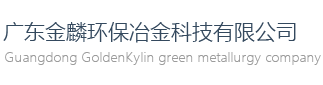
<style>
.page{position:relative;width:323px;height:85px;background:#ffffff}
.page>*{position:absolute;margin:0}
.t1{font:21.3px "MicrosoftYaHeiLight";color:#34495e}
.t2{font:13.3px "MicrosoftYaHeiLight";color:#9c9c9c}
</style>
<div class="page">
<p class="t1" style="left:3px;top:22px;width:293px;height:21px">广东金麟环保冶金科技有限公司</p>
<p class="t2" style="left:5px;top:52px;width:316px;height:13px">Guangdong GoldenKylin green metallurgy company</p>
</div>
